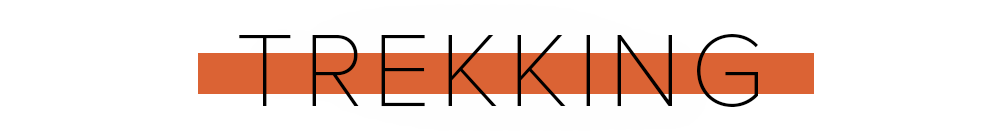
<style>
.page{position:relative;width:1000px;height:140px;background:#ffffff}
.page>*{position:absolute;margin:0}
.t1{font:105.9px "ProximaNovaT-Thin";letter-spacing:0.1em;color:#000000;text-transform:uppercase}
</style>
<div class="page">
<p class="t1" style="left:239px;top:34px;width:519px;height:73px">trekking</p>
</div>
